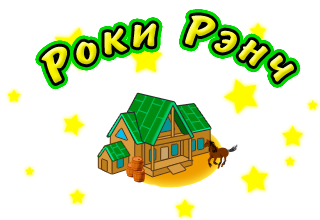
<style>
.page{position:relative;width:320px;height:220px;background:#ffffff}
.page>*{position:absolute;margin:0}
.t1{font:48px "BrushType-Bold";letter-spacing:0.1em;font-style:italic}
</style>
<div class="page">
<p class="t1" style="left:41px;top:15px;width:253px;height:68px">Ðîêè Ðýí÷</p>
</div>
